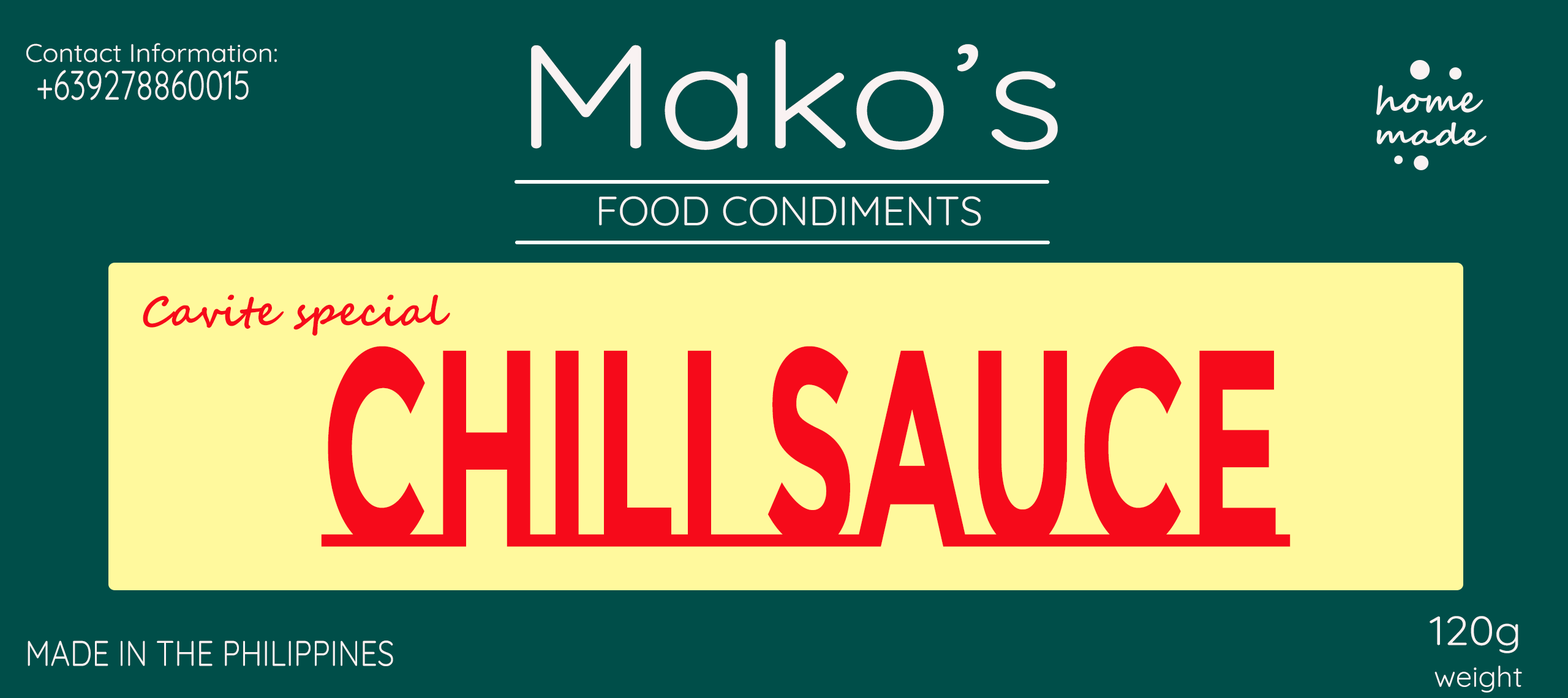
<style>
.page{position:relative;width:1568px;height:698px;background:#004e49}
.page>*{position:absolute;margin:0}
.t1{font:147.1px "Quicksand-Regular";color:#f9f2f2;scale:1.17 1}
.t2{font:25.3px "Quicksand-Regular";color:#f9f2f2;scale:1.06 1}
.t3{font:40.8px "Quicksand-Regular";color:#f9f2f2;scale:0.75 1}
.t4{font:40.8px "Quicksand-Regular";color:#f9f2f2}
.t5{font:40.8px "SegoeScript-Bold";color:#f60a1a}
.t6{font:280.2px "MontserratSubrayada-Bold";color:#f60a1a;scale:0.53 1}
.t7{font:40.8px "Quicksand-Regular";color:#f9f2f2;scale:1.06 1}
.t8{font:35.6px "Quicksand-Regular";color:#f9f2f2;scale:0.86 1}
.t9{font:28.7px "Quicksand-Regular";color:#fbf5f6}
</style>
<div class="page">
<p class="t1" style="left:531px;top:39px;width:527px;height:111px">Mako’s</p>
<p class="t2" style="left:26px;top:43px;width:251px;height:19px">Contact Information:</p>
<p class="t3" style="left:37px;top:70px;width:212px;height:30px">+639278860015</p>
<p class="t4" style="left:599px;top:196px;width:382px;height:30px">FOOD CONDIMENTS</p>
<p class="t5" style="left:143px;top:295px;width:307px;height:41px">Cavite special</p>
<p class="t6" style="left:321px;top:346px;width:970px;height:201px">chili sauce</p>
<p class="t7" style="left:1430px;top:616px;width:88px;height:38px">120g</p>
<p class="t8" style="left:28px;top:641px;width:365px;height:25px">MADE IN THE PHILIPPINES</p>
<p class="t9" style="left:1434px;top:666px;width:88px;height:27px">weight</p>
</div>
